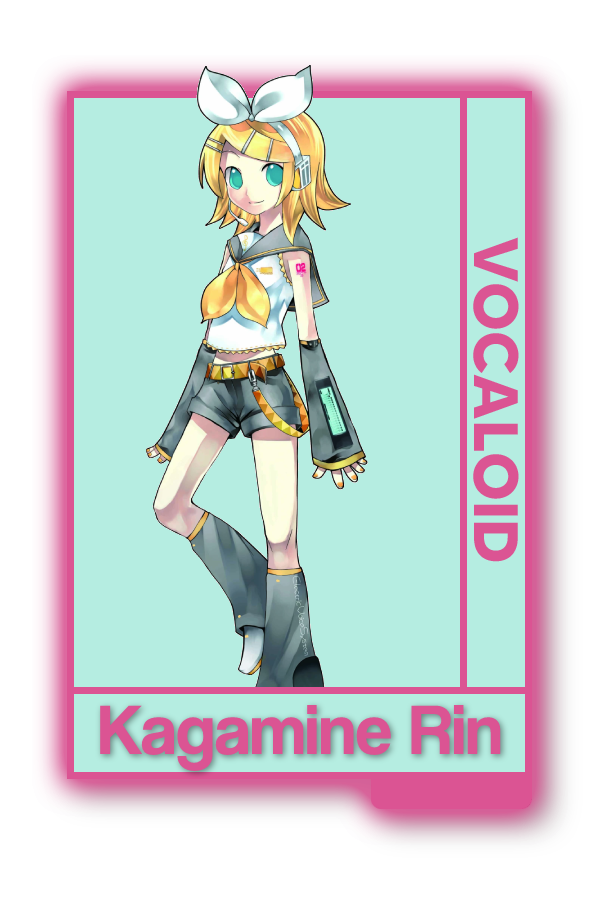
<style>
.page{position:relative;width:600px;height:900px;background:#b5ede1}
.page>*{position:absolute;margin:0}
.t1{font:62.5px "MADETOMMY-Bold";color:#db5493}
.t2{font:72.8px "CoolveticaRg-Regular";color:#db5493}
</style>
<div class="page">
<p class="t1" style="left:473px;top:237px;width:46px;height:325px;rotate:90deg">VOCALOID</p>
<p class="t2" style="left:100px;top:705px;width:401px;height:66px">Kagamine Rin</p>
</div>
